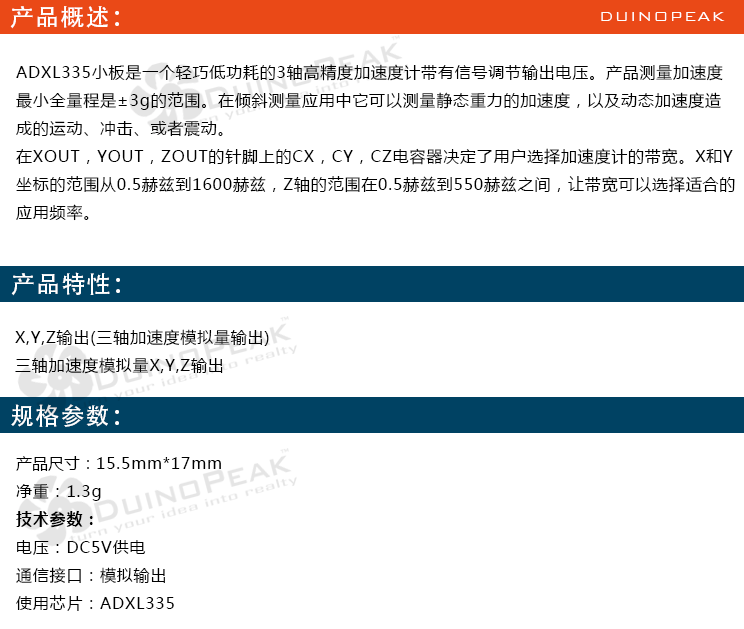
<style>
.page{position:relative;width:744px;height:629px;background:#ffffff}
.page>*{position:absolute;margin:0}
.t1{font:24px "AdobeHeitiStd-Regular";letter-spacing:0.05em;color:#ffffff}
.t2{font:18px "BankGothicBT-Light";letter-spacing:0.05em;color:#ffffff}
.t3{font:16px "MicrosoftYaHei";letter-spacing:0.05em;color:#000000}
.t4{font:16px "MicrosoftYaHei";color:#000000}
.t5{font:16px "MicrosoftYaHei-Bold";letter-spacing:0.05em;color:#000000}
</style>
<div class="page">
<p class="t1" style="left:10px;top:6px;width:109px;height:23px">产品概述：</p>
<p class="t2" style="left:601px;top:12px;width:124px;height:9px">DUINOPEAK</p>
<p class="t3" style="left:16px;top:64px;width:719px;height:157px">ADXL335小板是一个轻巧低功耗的3轴高精度加速度计带有信号调节输出电压。产品测量加速度<br>最小全量程是±3g的范围。在倾斜测量应用中它可以测量静态重力的加速度，以及动态加速度造<br>成的运动、冲击、或者震动。<br>在XOUT，YOUT，ZOUT的针脚上的CX，CY，CZ电容器决定了用户选择加速度计的带宽。X和Y<br>坐标的范围从0.5赫兹到1600赫兹，Z轴的范围在0.5赫兹到550赫兹之间，让带宽可以选择适合的<br>应用频率。</p>
<p class="t1" style="left:11px;top:272px;width:109px;height:24px">产品特性：</p>
<p class="t3" style="left:15px;top:329px;width:254px;height:45px">X,Y,Z输出(三轴加速度模拟量输出)<br>三轴加速度模拟量X,Y,Z输出</p>
<p class="t1" style="left:11px;top:404px;width:108px;height:23px">规格参数：</p>
<p class="t3" style="left:16px;top:456px;width:205px;height:155px"><span class="t4">产品尺寸：</span>15.5mm*17mm<br>净重：1.3g<br><span class="t5">技术参数：<br></span>电压：DC5V供电<br>通信接口：模拟输出<br>使用芯片：ADXL335</p>
</div>
